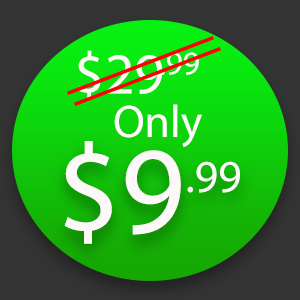
<style>
.page{position:relative;width:300px;height:300px;background:#333333}
.page>*{position:absolute;margin:0}
.t1{font:58.3px "MyriadPro-Regular";color:#fdf9f9}
.t2{font:33.3px "MyriadPro-Regular";color:#fdf9f9}
.t3{font:45.8px "MyriadPro-Regular";color:#fdf9f9}
.t4{font:125px "MyriadPro-Regular";color:#fdf9f9}
</style>
<div class="page">
<p class="t1" style="left:78px;top:50px;width:85px;height:49px">$29</p>
<p class="t2" style="left:160px;top:52px;width:39px;height:23px">.99</p>
<p class="t3" style="left:114px;top:104px;width:88px;height:43px">Only</p>
<p class="t4" style="left:64px;top:141px;width:117px;height:103px">$9</p>
<p class="t3" style="left:187px;top:161px;width:53px;height:32px">.99</p>
</div>
